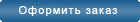
<style>
.page{position:relative;width:140px;height:22px}
.page>*{position:absolute;margin:0}
.t1{font:11px "ArialMT";letter-spacing:0.099em;color:#ffffff}
</style>
<div class="page">
<p class="t1" style="left:19px;top:6px;width:98px;height:10px">Оформить заказ</p>
</div>
